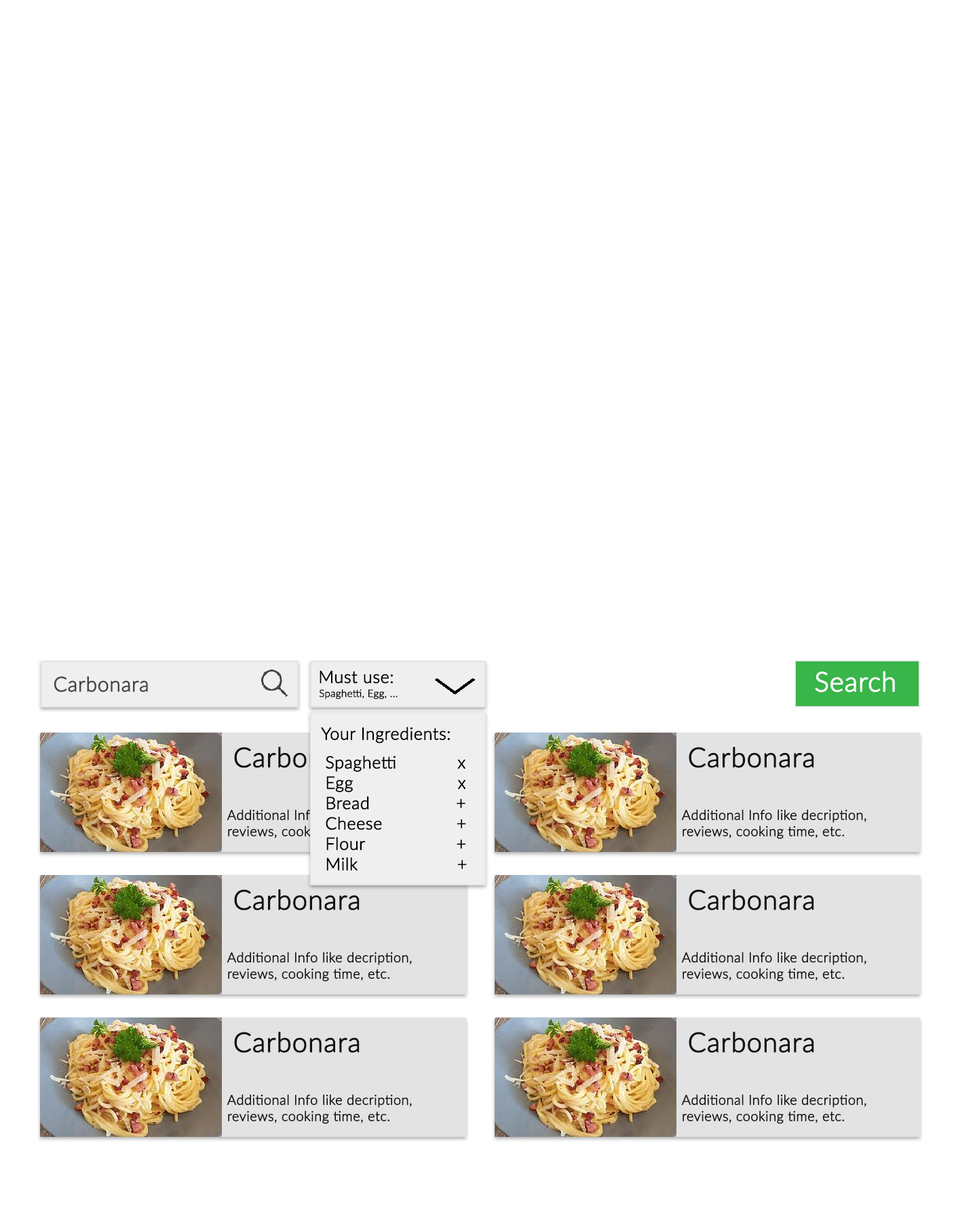
<style>
.page{position:relative;width:977px;height:1221px;background:#ffffff}
.page>*{position:absolute;margin:0}
.t1{font:20.3px "Lato-Light";color:#464646;font-weight:bold}
.t2{font:17px "Lato-Light";color:#000000;font-weight:bold}
.t3{font:27.1px "Lato-Light";color:#ffffff;font-weight:bold}
.t4{font:10.2px "Lato-Light";color:#000000;font-weight:bold}
.t5{font:27.1px "Lato-Light";font-weight:bold}
.t6{font:27.1px "Lato-Light";color:#121212;font-weight:bold}
.t7{font:13.6px "Lato-Light";font-weight:bold}
.t8{font:13.6px "Lato-Light";color:#121212;font-weight:bold}
</style>
<div class="page">
<p class="t1" style="left:54px;top:676px;width:94px;height:16px">Carbonara</p>
<p class="t2" style="left:319px;top:670px;width:74px;height:14px">Must use:</p>
<p class="t3" style="left:815px;top:671px;width:80px;height:22px">Search</p>
<p class="t4" style="left:319px;top:689px;width:78px;height:10px">Spaghetti, Egg, ...</p>
<p class="t2" style="left:321px;top:726px;width:129px;height:17px">Your Ingredients:</p>
<p class="t5" style="left:234px;top:747px;width:125px;height:21px">Carbonara</p>
<p class="t6" style="left:688px;top:747px;width:126px;height:21px">Carbonara</p>
<p class="t2" style="left:326px;top:756px;width:141px;height:115px">Spaghetti            x<br>Egg                     x<br>Bread                 +<br>Cheese               +<br>Flour                  +<br>Milk                    +</p>
<p class="t7" style="left:227px;top:809px;width:185px;height:30px">Additional Info like decription, <br>reviews, cooking time, etc.</p>
<p class="t8" style="left:681px;top:809px;width:185px;height:30px">Additional Info like decription, <br>reviews, cooking time, etc.</p>
<p class="t6" style="left:234px;top:889px;width:125px;height:21px">Carbonara</p>
<p class="t6" style="left:688px;top:889px;width:126px;height:21px">Carbonara</p>
<p class="t8" style="left:227px;top:952px;width:185px;height:29px">Additional Info like decription, <br>reviews, cooking time, etc.</p>
<p class="t8" style="left:681px;top:952px;width:185px;height:29px">Additional Info like decription, <br>reviews, cooking time, etc.</p>
<p class="t6" style="left:234px;top:1032px;width:125px;height:21px">Carbonara</p>
<p class="t6" style="left:688px;top:1032px;width:126px;height:21px">Carbonara</p>
<p class="t8" style="left:227px;top:1094px;width:185px;height:30px">Additional Info like decription, <br>reviews, cooking time, etc.</p>
<p class="t8" style="left:681px;top:1094px;width:185px;height:30px">Additional Info like decription, <br>reviews, cooking time, etc.</p>
</div>
